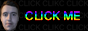
<style>
.page{position:relative;width:88px;height:31px;background:#000000}
.page>*{position:absolute;margin:0}
.t1{font:12px "AcuminConcept-Regular"}
</style>
<div class="page">
<p class="t1" style="left:25px;top:11px;width:55px;height:10px">CLICK ME</p>
</div>
